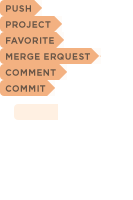
<style>
.page{position:relative;width:133px;height:200px;background:#ffffff}
.page>*{position:absolute;margin:0}
.t1{font:9px "GothamHTF-Bold";letter-spacing:0.04em;color:#6a5647;text-transform:uppercase}
</style>
<div class="page">
<p class="t1" style="left:6px;top:5px;width:25px;height:7px">PUSH</p>
<p class="t1" style="left:6px;top:21px;width:45px;height:7px">PROJECT</p>
<p class="t1" style="left:6px;top:37px;width:48px;height:7px">FAVORITE</p>
<p class="t1" style="left:6px;top:53px;width:84px;height:7px">MERGE ERQUEST</p>
<p class="t1" style="left:5px;top:69px;width:51px;height:7px">COMMENT</p>
<p class="t1" style="left:5px;top:85px;width:41px;height:7px">COMMIT</p>
</div>
